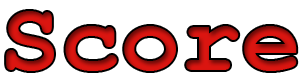
<style>
.page{position:relative;width:300px;height:76px;background:#ffffff}
.page>*{position:absolute;margin:0}
.t1{font:100px "CourierNewPS-BoldMT"}
</style>
<div class="page">
<p class="t1" style="left:6px;top:11px;width:291px;height:60px">Score</p>
</div>
